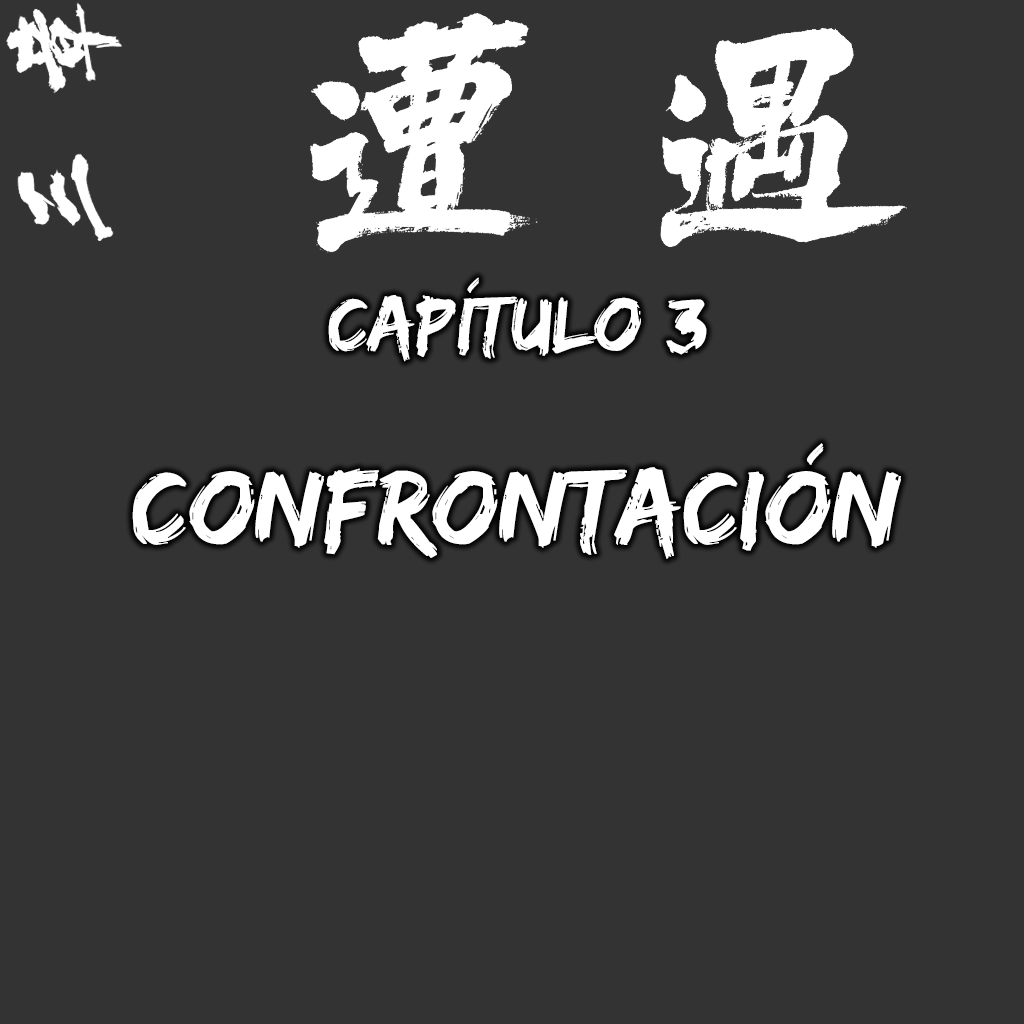
<style>
.page{position:relative;width:1024px;height:1024px;background:#333333}
.page>*{position:absolute;margin:0}
.t1{font:80px "EdoSZ";color:#ffffff}
.t2{font:109.9px "EdoSZ";color:#ffffff}
</style>
<div class="page">
<p class="t1" style="left:328px;top:277px;width:379px;height:85px">Capítulo 3</p>
<p class="t2" style="left:132px;top:443px;width:769px;height:116px">Confrontación</p>
</div>
